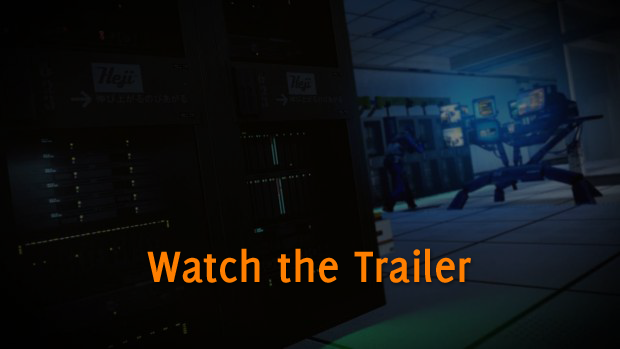
<style>
.page{position:relative;width:620px;height:349px}
.page>*{position:absolute;margin:0}
.t1{font:48px "Delicious-Bold";color:#ff7f00}
</style>
<div class="page">
<p class="t1" style="left:147px;top:248px;width:324px;height:35px">Watch the Trailer</p>
</div>
